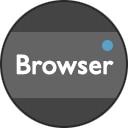
<style>
.page{position:relative;width:128px;height:128px;background:#646464}
.page>*{position:absolute;margin:0}
.t1{font:27.2px "GillSansMTPro-Medium";color:#ffffff;font-weight:bold}
</style>
<div class="page">
<p class="t1" style="left:16px;top:54px;width:98px;height:21px">Browser</p>
</div>
